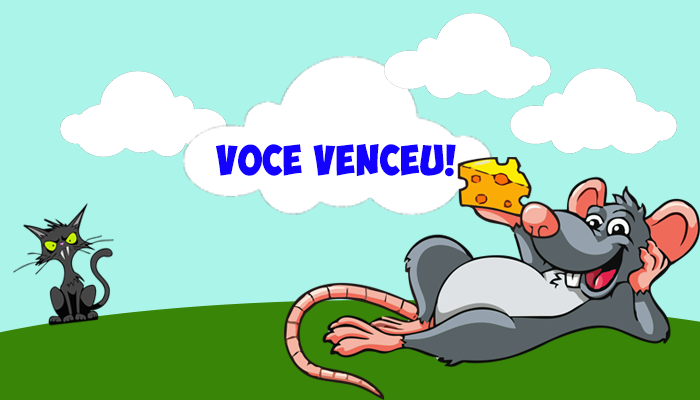
<style>
.page{position:relative;width:700px;height:400px;background:#abf4e9}
.page>*{position:absolute;margin:0}
.t1{font:29.8px "ObelixPro";letter-spacing:0.025em;color:#1301ff}
</style>
<div class="page">
<p class="t1" style="left:216px;top:143px;width:240px;height:34px">VOCE VENCEU!</p>
</div>
